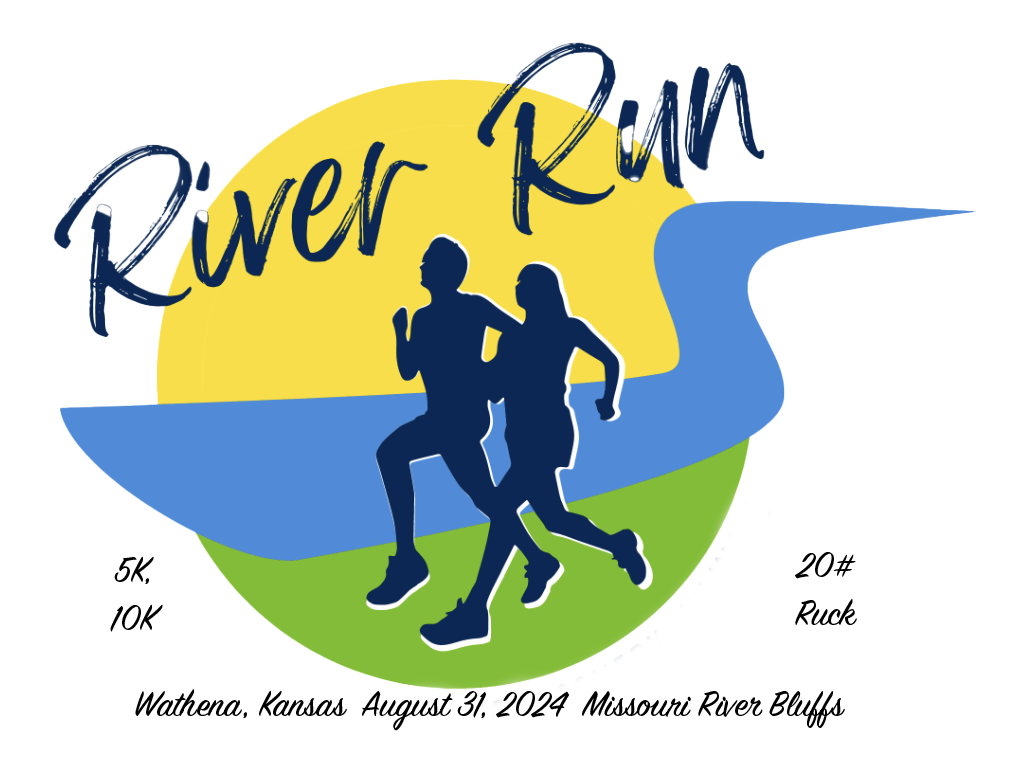
<style>
.page{position:relative;width:1012px;height:772px;background:#ffffff}
.page>*{position:absolute;margin:0}
.t1{font:40px "SignPainter-HouseScript";color:#000000}
</style>
<div class="page">
<p class="t1" style="left:110px;top:556px;width:53px;height:76px;text-align:center">5K,<br>10K</p>
<p class="t1" style="left:795px;top:552px;width:62px;height:73px;text-align:center">20# Ruck</p>
<p class="t1" style="left:135px;top:689px;width:710px;height:42px">Wathena, Kansas  August 31, 2024  Missouri River Bluffs</p>
</div>
